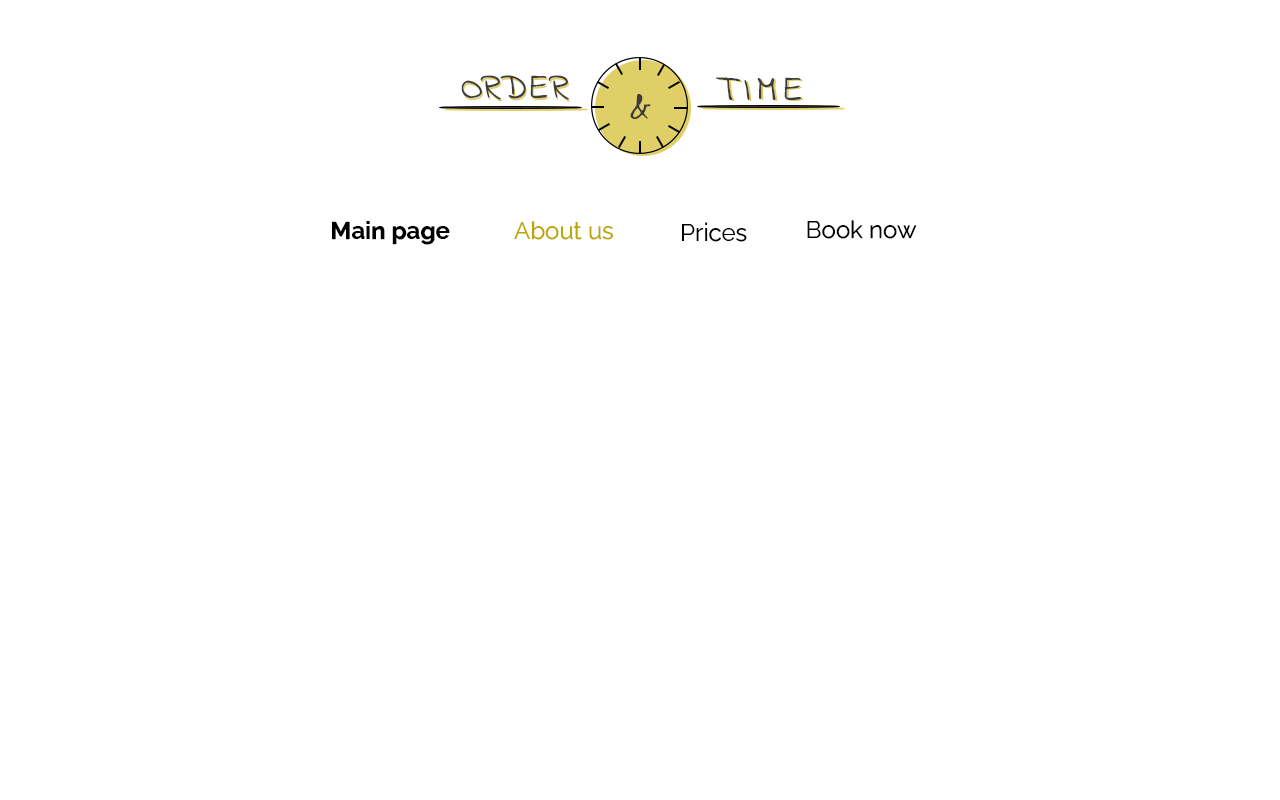
<style>
.page{position:relative;width:1280px;height:800px;background:#ffffff}
.page>*{position:absolute;margin:0}
.t1{font:36px "IndieFlower";letter-spacing:0.01em;color:#3e3b3b}
.t2{font:36px "IndieFlower";letter-spacing:0.01em}
.t3{font:36px "IndieFlower";color:#3e3b3b}
.t4{font:36px "IndieFlower"}
.t5{font:36px "IndieFlower";color:#3e3b3b;scale:1.3 1}
.t6{font:24px "RalewayRoman-Bold";color:#000000;font-weight:bold}
.t7{font:24px "RalewayRoman-Regular";color:#bda504}
.t8{font:24px "RalewayRoman-Regular";color:#000000}
</style>
<div class="page">
<p class="t1" style="left:461px;top:75px;width:108px;height:25px">ORDER</p>
<p class="t2" style="left:462px;top:77px;width:108px;height:25px">ORDER</p>
<p class="t3" style="left:716px;top:77px;width:86px;height:23px">TIME</p>
<p class="t4" style="left:718px;top:78px;width:86px;height:23px">TIME</p>
<p class="t5" style="left:630px;top:94px;width:21px;height:25px">&amp;</p>
<p class="t6" style="left:332px;top:221px;width:118px;height:24px">Main page</p>
<p class="t7" style="left:514px;top:221px;width:99px;height:19px">About us</p>
<p class="t8" style="left:682px;top:222px;width:65px;height:20px">Prices</p>
<p class="t8" style="left:807px;top:220px;width:110px;height:19px">Book now</p>
</div>
